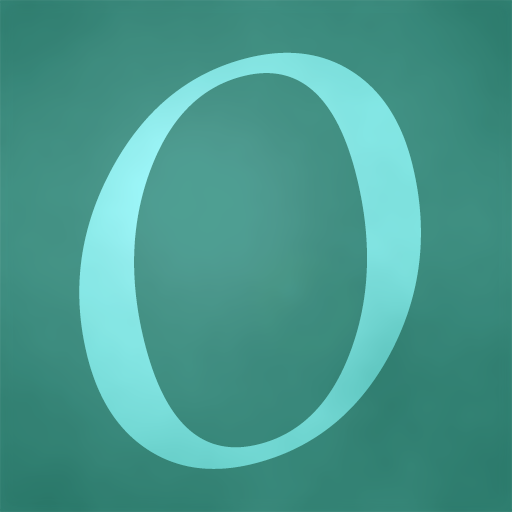
<style>
.page{position:relative;width:512px;height:512px}
.page>*{position:absolute;margin:0}
.t1{font:520.2px "LucidaCalligraphy-Italic";color:#7fe2df;font-variant:small-caps}
</style>
<div class="page">
<p class="t1" style="left:79px;top:52px;width:342px;height:417px;rotate:-14deg">O</p>
</div>
